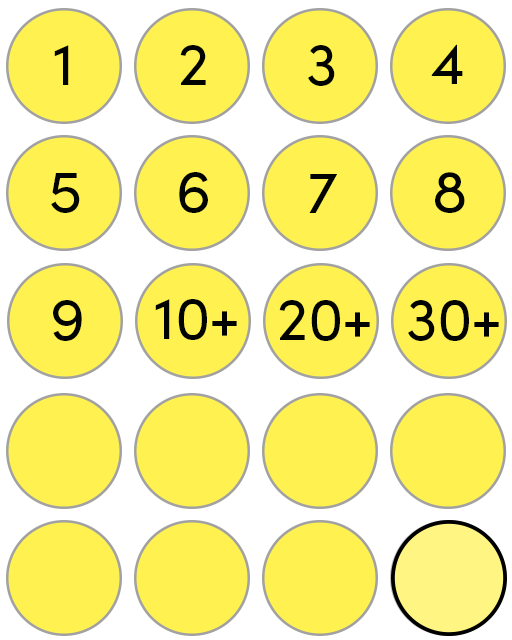
<style>
.page{position:relative;width:512px;height:640px;background:#fff14f}
.page>*{position:absolute;margin:0}
.t1{font:60px "SofiaProRegular";color:#010400}
</style>
<div class="page">
<p class="t1" style="left:54px;top:45px;width:15px;height:40px">1</p>
<p class="t1" style="left:180px;top:45px;width:26px;height:40px">2</p>
<p class="t1" style="left:308px;top:45px;width:27px;height:41px">3</p>
<p class="t1" style="left:431px;top:44px;width:32px;height:40px">4</p>
<p class="t1" style="left:51px;top:173px;width:29px;height:40px">5</p>
<p class="t1" style="left:179px;top:172px;width:29px;height:41px">6</p>
<p class="t1" style="left:309px;top:174px;width:28px;height:39px">7</p>
<p class="t1" style="left:435px;top:172px;width:30px;height:41px">8</p>
<p class="t1" style="left:53px;top:300px;width:29px;height:41px">9</p>
<p class="t1" style="left:155px;top:299px;width:82px;height:41px">10+</p>
<p class="t1" style="left:279px;top:300px;width:91px;height:41px">20+</p>
<p class="t1" style="left:408px;top:300px;width:91px;height:41px">30+</p>
</div>
